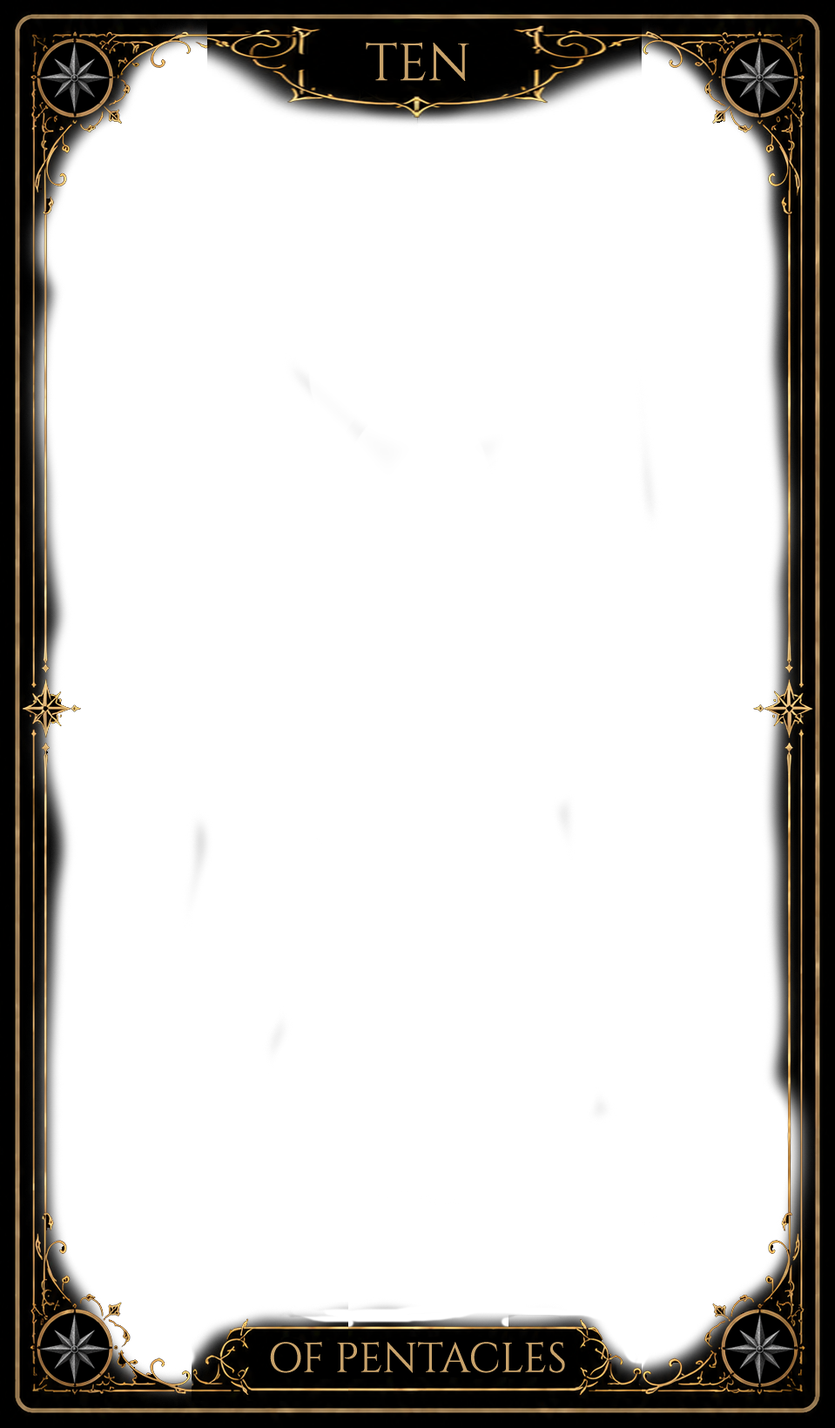
<style>
.page{position:relative;width:835px;height:1428px;background:#ffffff}
.page>*{position:absolute;margin:0}
.t1{font:52.2px "Cinzel-Regular";color:#c8a26a}
.t2{font:41.8px "Cinzel-Regular";color:#c8a26a}
</style>
<div class="page">
<p class="t1" style="left:366px;top:42px;width:103px;height:39px">TEN</p>
<p class="t2" style="left:270px;top:1342px;width:295px;height:31px">OF PENTACLES</p>
</div>
